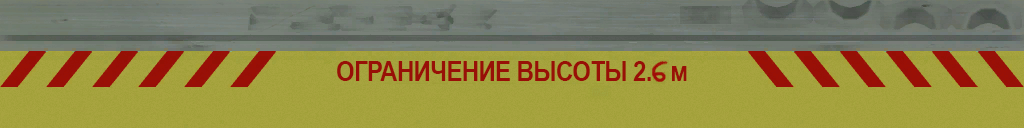
<style>
.page{position:relative;width:1024px;height:128px}
.page>*{position:absolute;margin:0}
.t1{font:27px "Arial-BoldMT";letter-spacing:-0.02em;color:#981007;scale:0.88 1}
</style>
<div class="page">
<p class="t1" style="left:337px;top:61px;width:350px;height:20px">ОГРАНИЧЕНИЕ ВЫСОТЫ 2.   м</p>
</div>
